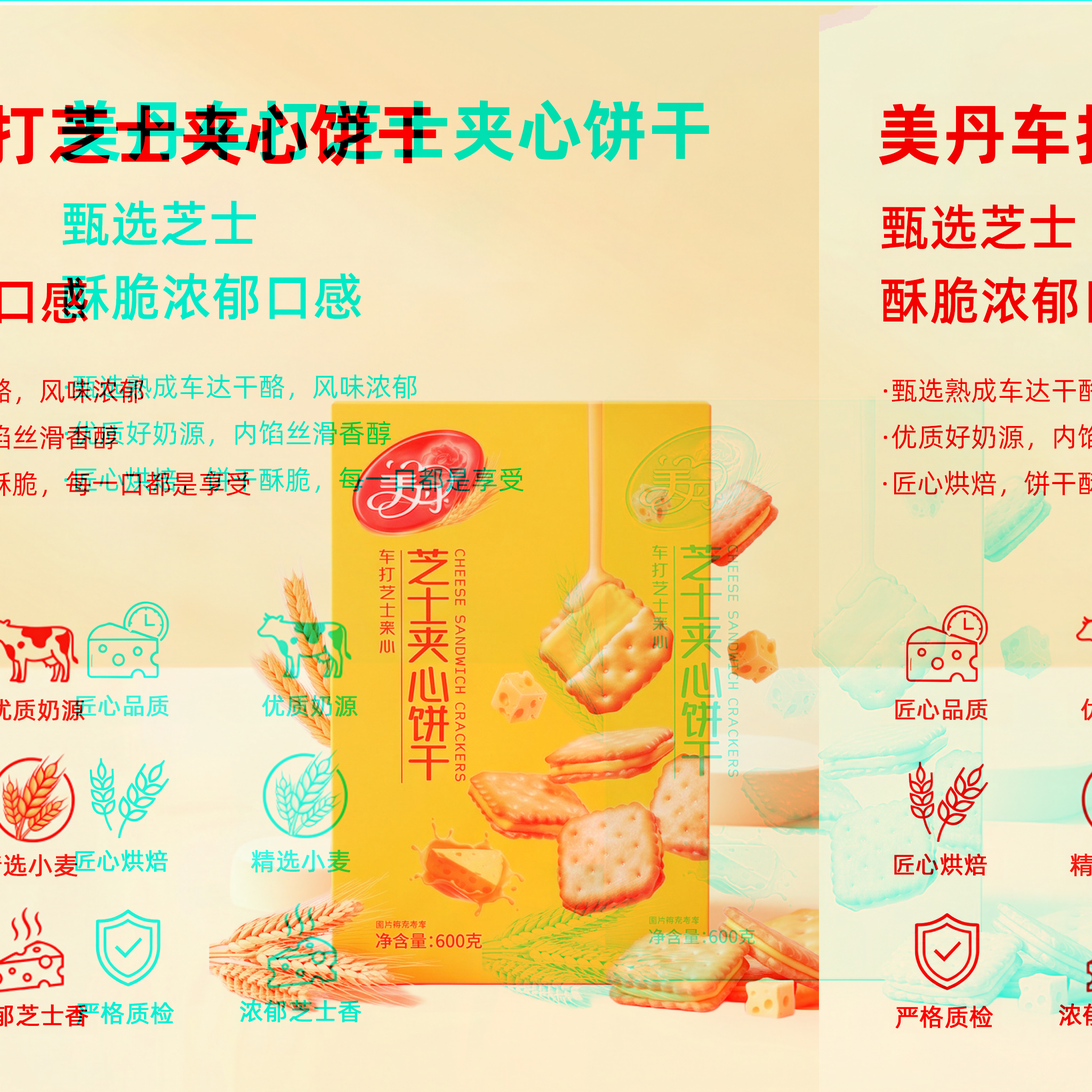
<style>
.page{position:relative;width:1092px;height:1092px}
.page>*{position:absolute;margin:0}
.t1{font:66.6px "AlibabaPuHuiTi-Bold"}
.t2{font:50.2px "AlibabaPuHuiTi-Medium";color:#00e9c9}
.t3{font:51.4px "AlibabaPuHuiTi-Medium";color:#00eac8}
.t4{font:27.1px "AlibabaPuHuiTi-Regular"}
.t5{font:24px "AlibabaPuHuiTi-Regular";font-weight:bold}
.t6{font:24.9px "AlibabaPuHuiTi-Regular";font-weight:bold}
.t7{font:24.4px "AlibabaPuHuiTi-Regular";font-weight:bold}
</style>
<div class="page">
<p class="t1" style="left:60px;top:98px;width:649px;height:63px">美丹车打芝士夹心饼干</p>
<p class="t2" style="left:62px;top:199px;width:194px;height:46px">甄选芝士</p>
<p class="t3" style="left:62px;top:271px;width:299px;height:49px">酥脆浓郁口感</p>
<p class="t4" style="left:65px;top:373px;width:351px;height:26px">·甄选熟成车达干酪，风味浓郁</p>
<p class="t4" style="left:65px;top:419px;width:326px;height:26px">·优质好奶源，内馅丝滑香醇</p>
<p class="t4" style="left:64px;top:465px;width:460px;height:27px">·匠心烘焙，饼干酥脆，每一口都是享受</p>
<p class="t5" style="left:76px;top:694px;width:92px;height:22px">匠心品质</p>
<p class="t5" style="left:262px;top:694px;width:96px;height:22px">优质奶源</p>
<p class="t5" style="left:75px;top:848px;width:93px;height:23px">匠心烘焙</p>
<p class="t6" style="left:251px;top:848px;width:99px;height:24px">精选小麦</p>
<p class="t7" style="left:76px;top:1000px;width:98px;height:24px">严格质检</p>
<p class="t7" style="left:240px;top:999px;width:122px;height:23px">浓郁芝士香</p>
</div>
